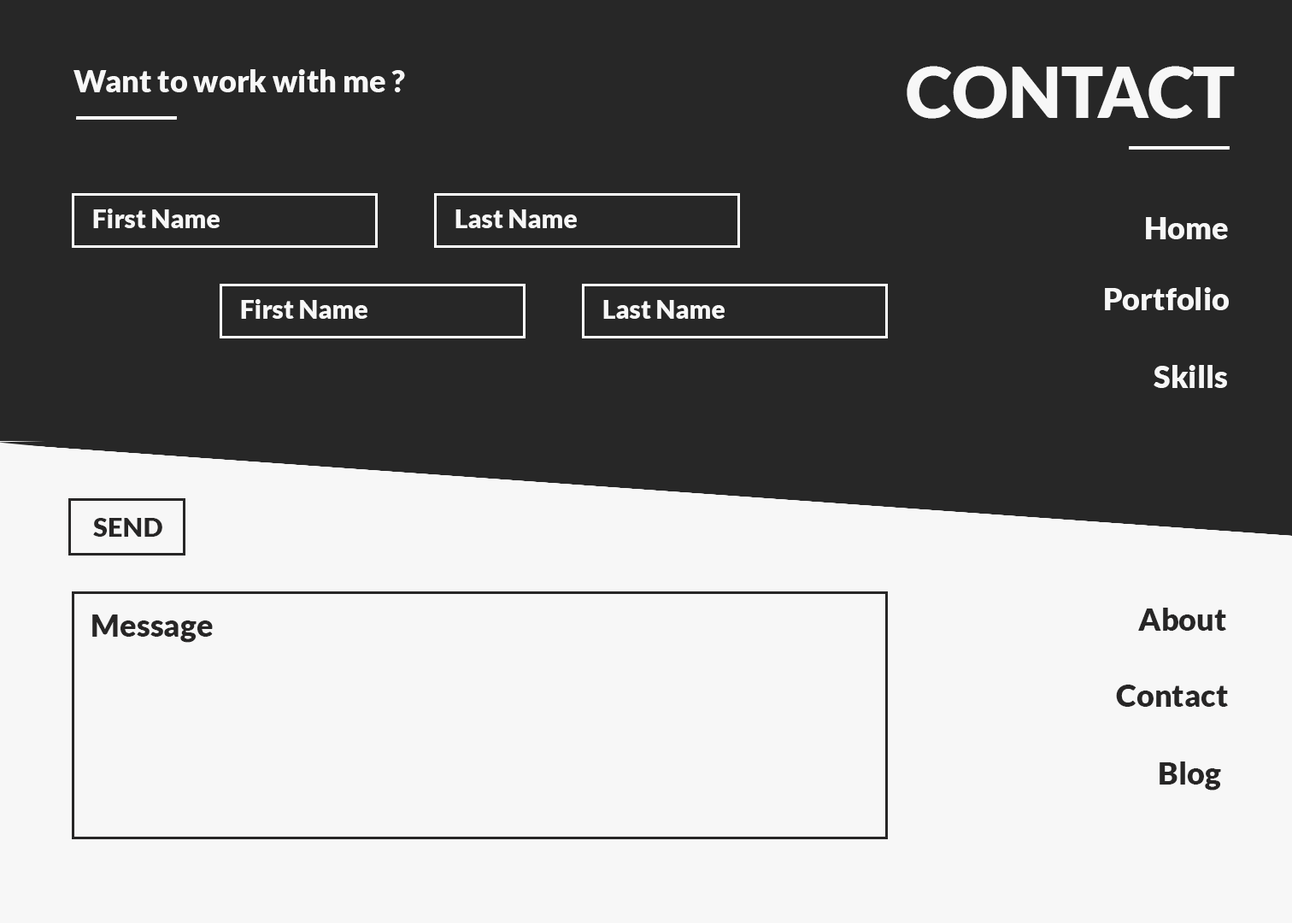
<style>
.page{position:relative;width:1292px;height:923px;background:#272727}
.page>*{position:absolute;margin:0}
.t1{font:70.5px "Lato-Black";color:#f7f7f7}
.t2{font:30.8px "Lato-Black";color:#f7f7f7}
.t3{font:25.6px "Lato-Black";color:#f7f7f7}
.t4{font:26.8px "Lato-Black";color:#272626}
.t5{font:30.8px "Lato-Black";color:#272626}
</style>
<div class="page">
<p class="t1" style="left:907px;top:66px;width:328px;height:53px">CONTACT</p>
<p class="t2" style="left:73px;top:69px;width:332px;height:23px">Want to work with me ?</p>
<p class="t3" style="left:93px;top:209px;width:127px;height:19px">First Name</p>
<p class="t3" style="left:455px;top:209px;width:122px;height:19px">Last Name</p>
<p class="t2" style="left:1146px;top:217px;width:82px;height:22px">Home</p>
<p class="t2" style="left:1105px;top:287px;width:124px;height:23px">Portfolio</p>
<p class="t3" style="left:241px;top:299px;width:126px;height:20px">First Name</p>
<p class="t3" style="left:603px;top:300px;width:122px;height:19px">Last Name</p>
<p class="t2" style="left:1154px;top:365px;width:73px;height:23px">Skills</p>
<p class="t4" style="left:93px;top:518px;width:69px;height:19px">SEND</p>
<p class="t5" style="left:92px;top:614px;width:121px;height:29px">Message</p>
<p class="t5" style="left:1138px;top:608px;width:88px;height:23px">About</p>
<p class="t5" style="left:1116px;top:684px;width:112px;height:23px">Contact</p>
<p class="t5" style="left:1160px;top:761px;width:61px;height:29px">Blog</p>
</div>
